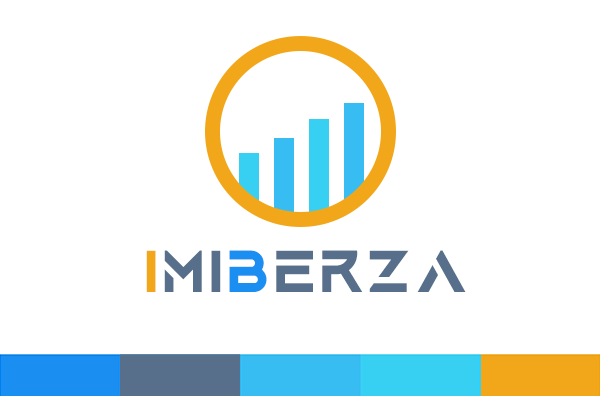
<style>
.page{position:relative;width:600px;height:396px;background:#ffffff}
.page>*{position:absolute;margin:0}
.t1{font:62.5px "AquireBold";letter-spacing:0.05em;color:#576f8b}
.t2{font:62.5px "AquireBold";letter-spacing:0.05em;color:#f2a71a}
.t3{font:62.5px "AquireBold";letter-spacing:0.05em;color:#1a8ef1}
</style>
<div class="page">
<p class="t1" style="left:146px;top:250px;width:320px;height:42px"><span class="t2">i</span>mi<span class="t3">B</span>erza</p>
</div>
